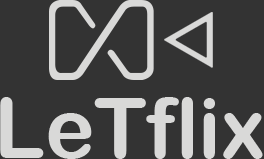
<style>
.page{position:relative;width:264px;height:159px;background:#333333}
.page>*{position:absolute;margin:0}
.t1{font:83.7px "ArialRoundedMTBold";color:#d9d9d8}
</style>
<div class="page">
<p class="t1" style="left:0px;top:97px;width:263px;height:62px">LeTflix</p>
</div>
